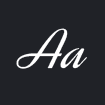
<style>
.page{position:relative;width:105px;height:105px;background:#202227}
.page>*{position:absolute;margin:0}
.t1{font:56px "Dynalight-Regular";color:#ffffff;scale:1.14 1}
</style>
<div class="page">
<p class="t1" style="left:16px;top:28px;width:71px;height:41px">Aa</p>
</div>
